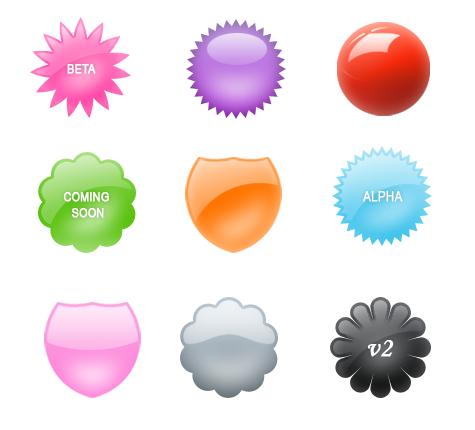
<style>
.page{position:relative;width:475px;height:430px;background:#ffffff}
.page>*{position:absolute;margin:0}
.t1{font:13px "ArialNarrow";color:#ffffff;text-transform:uppercase;font-weight:bold}
.t2{font:14px "ArialNarrow";color:#ffffff;text-transform:uppercase;font-weight:bold}
.t3{font:28px "MonotypeCorsiva";color:#ffffff;font-weight:bold}
</style>
<div class="page">
<p class="t1" style="left:67px;top:64px;width:29px;height:10px">BETA</p>
<p class="t1" style="left:63px;top:192px;width:46px;height:26px;text-align:center">COMING <br>SOON</p>
<p class="t2" style="left:363px;top:191px;width:40px;height:11px">ALPHA</p>
<p class="t3" style="left:367px;top:340px;width:27px;height:17px">v2</p>
</div>
